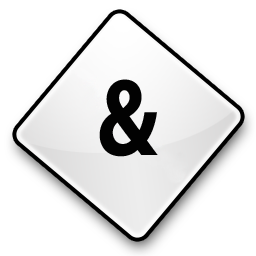
<style>
.page{position:relative;width:256px;height:256px;background:#ffffff}
.page>*{position:absolute;margin:0}
.t1{font:110px "MyriadPro-Bold";letter-spacing:0.005em;color:#020202;scale:0.82 1}
</style>
<div class="page">
<p class="t1" style="left:99px;top:79px;width:59px;height:78px">&amp;</p>
</div>
